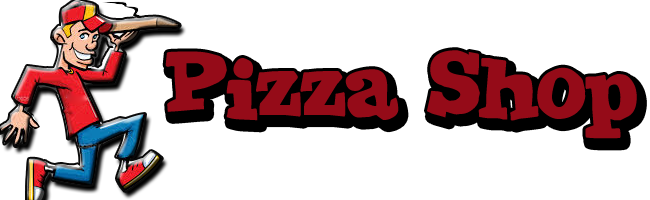
<style>
.page{position:relative;width:650px;height:200px;background:#ffffff}
.page>*{position:absolute;margin:0}
.t1{font:92px "JointbyPizzaDude";color:#950b18}
</style>
<div class="page">
<p class="t1" style="left:165px;top:50px;width:472px;height:89px">Pizza Shop</p>
</div>
